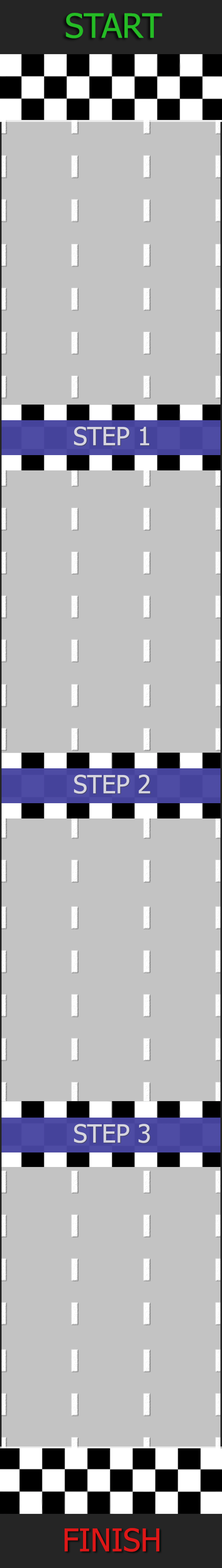
<style>
.page{position:relative;width:222px;height:1568px;background:#c3c3c3}
.page>*{position:absolute;margin:0}
.t1{font:25.1px "Tahoma";color:#d6d5df}
.t2{font:31.3px "Tahoma";color:#dd1717}
</style>
<div class="page">
<p class="t1" style="left:74px;top:426px;width:75px;height:20px">STEP 1</p>
<p class="t1" style="left:74px;top:775px;width:77px;height:19px">STEP 2</p>
<p class="t1" style="left:74px;top:1124px;width:76px;height:19px">STEP 3</p>
<p class="t2" style="left:65px;top:1528px;width:95px;height:24px">FINISH</p>
</div>
